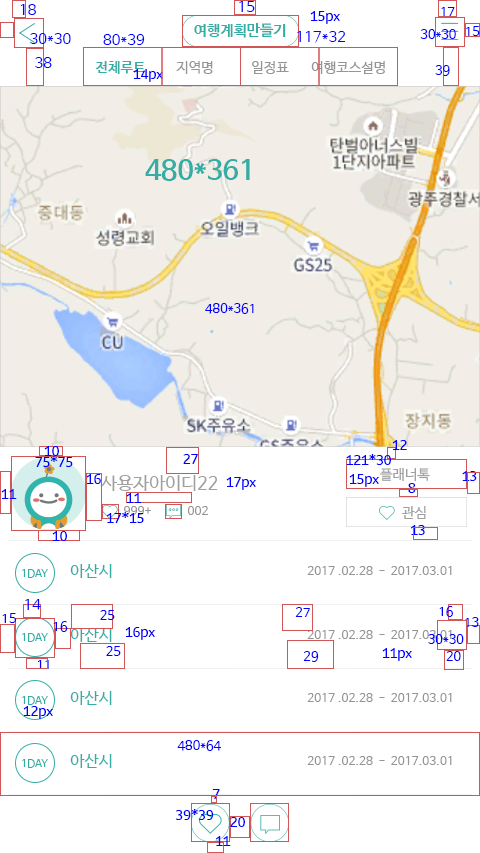
<style>
.page{position:relative;width:480px;height:853px;background:#ffffff}
.page>*{position:absolute;margin:0}
.t1{font:15px "NanumBarunGothic";color:#0000ff}
.t2{font:13px "MoebiusKorea-Regular";color:#0000ff}
.t3{font:13px "NanumBarunGothic";color:#0000ff}
.t4{font:15px "NanumBarunGothicBold";color:#36ada4}
.t5{font:14px "NanumBarunGothicBold";color:#36ada4}
.t6{font:14px "NanumBarunGothic";color:#959595}
.t7{font:28px "NanumBarunGothicBold";color:#36ada4}
.t8{font:14px "NanumBarunGothic";color:#a0a0a0}
.t9{font:18px "NanumBarunGothic";color:#a0a0a0}
.t10{font:12px "NanumBarunGothic";color:#959595}
.t11{font:10.7px "NanumBarunGothic";color:#36ada4}
.t12{font:16px "NanumBarunGothic";color:#36ada4}
</style>
<div class="page">
<p class="t1" style="left:20px;top:4px;width:16px;height:11px">18</p>
<p class="t1" style="left:239px;top:1px;width:16px;height:11px">15</p>
<p class="t2" style="left:310px;top:11px;width:30px;height:13px">15px</p>
<p class="t3" style="left:441px;top:7px;width:14px;height:9px">17</p>
<p class="t4" style="left:194px;top:23px;width:92px;height:15px">여행계획만들기</p>
<p class="t3" style="left:420px;top:29px;width:36px;height:10px">30*30</p>
<p class="t3" style="left:466px;top:26px;width:14px;height:10px">15</p>
<p class="t1" style="left:30px;top:33px;width:41px;height:11px">30*30</p>
<p class="t1" style="left:103px;top:34px;width:42px;height:11px">80*39</p>
<p class="t1" style="left:297px;top:31px;width:49px;height:12px">117*32</p>
<p class="t1" style="left:35px;top:57px;width:17px;height:11px">38</p>
<p class="t5" style="left:95px;top:61px;width:51px;height:13px">전체루트</p>
<p class="t6" style="left:176px;top:61px;width:37px;height:13px">지역명</p>
<p class="t6" style="left:252px;top:61px;width:37px;height:13px">일정표</p>
<p class="t6" style="left:311px;top:61px;width:74px;height:13px">여행코스설명</p>
<p class="t3" style="left:435px;top:65px;width:15px;height:11px">39</p>
<p class="t2" style="left:133px;top:69px;width:30px;height:13px">14px</p>
<p class="t7" style="left:145px;top:159px;width:105px;height:22px">480*361</p>
<p class="t3" style="left:205px;top:303px;width:49px;height:11px">480*361</p>
<p class="t2" style="left:44px;top:446px;width:15px;height:10px">10</p>
<p class="t2" style="left:392px;top:440px;width:15px;height:10px">12</p>
<p class="t2" style="left:35px;top:456px;width:38px;height:11px">75*75</p>
<p class="t2" style="left:183px;top:454px;width:15px;height:10px">27</p>
<p class="t2" style="left:346px;top:454px;width:45px;height:11px">121*30</p>
<p class="t8" style="left:380px;top:468px;width:50px;height:13px">플래너톡</p>
<p class="t2" style="left:462px;top:471px;width:15px;height:10px">13</p>
<p class="t2" style="left:86px;top:474px;width:15px;height:10px">16</p>
<p class="t9" style="left:100px;top:475px;width:118px;height:16px">사용자아이디22</p>
<p class="t2" style="left:226px;top:477px;width:30px;height:13px">17px</p>
<p class="t2" style="left:349px;top:474px;width:30px;height:13px">15px</p>
<p class="t2" style="left:408px;top:483px;width:8px;height:10px">8</p>
<p class="t2" style="left:1px;top:489px;width:16px;height:10px">11</p>
<p class="t2" style="left:126px;top:493px;width:16px;height:10px">11</p>
<p class="t10" style="left:124px;top:506px;width:27px;height:9px">999+</p>
<p class="t10" style="left:187px;top:506px;width:21px;height:9px">002</p>
<p class="t8" style="left:402px;top:506px;width:24px;height:13px">관심</p>
<p class="t2" style="left:107px;top:512px;width:37px;height:11px">17*15</p>
<p class="t2" style="left:52px;top:531px;width:15px;height:10px">10</p>
<p class="t2" style="left:411px;top:525px;width:14px;height:10px">13</p>
<p class="t11" style="left:22px;top:569px;width:26px;height:9px">1DAY</p>
<p class="t12" style="left:70px;top:564px;width:42px;height:14px">아산시</p>
<p class="t10" style="left:307px;top:566px;width:145px;height:9px">2017 .02.28  -  2017.03.01</p>
<p class="t1" style="left:25px;top:599px;width:16px;height:11px">14</p>
<p class="t3" style="left:439px;top:606px;width:14px;height:11px">16</p>
<p class="t3" style="left:2px;top:613px;width:15px;height:10px">15</p>
<p class="t3" style="left:100px;top:610px;width:15px;height:10px">25</p>
<p class="t3" style="left:295px;top:607px;width:15px;height:10px">27</p>
<p class="t3" style="left:465px;top:617px;width:14px;height:10px">13</p>
<p class="t3" style="left:53px;top:621px;width:15px;height:11px">16</p>
<p class="t12" style="left:70px;top:628px;width:42px;height:14px">아산시</p>
<p class="t2" style="left:125px;top:627px;width:30px;height:13px">16px</p>
<p class="t10" style="left:307px;top:630px;width:145px;height:9px">2017 .02.28  -  2017.03.01</p>
<p class="t11" style="left:22px;top:633px;width:26px;height:9px">1DAY</p>
<p class="t3" style="left:428px;top:634px;width:36px;height:10px">30*30</p>
<p class="t3" style="left:106px;top:646px;width:15px;height:10px">25</p>
<p class="t3" style="left:303px;top:651px;width:16px;height:11px">29</p>
<p class="t2" style="left:382px;top:648px;width:30px;height:13px">11px</p>
<p class="t3" style="left:446px;top:651px;width:15px;height:10px">20</p>
<p class="t3" style="left:38px;top:660px;width:11px;height:9px">11</p>
<p class="t11" style="left:22px;top:696px;width:26px;height:9px">1DAY</p>
<p class="t12" style="left:70px;top:691px;width:42px;height:14px">아산시</p>
<p class="t10" style="left:307px;top:693px;width:145px;height:9px">2017 .02.28  -  2017.03.01</p>
<p class="t2" style="left:23px;top:706px;width:30px;height:13px">12px</p>
<p class="t3" style="left:177px;top:740px;width:44px;height:11px">480*64</p>
<p class="t11" style="left:22px;top:759px;width:26px;height:9px">1DAY</p>
<p class="t12" style="left:70px;top:754px;width:42px;height:14px">아산시</p>
<p class="t10" style="left:307px;top:756px;width:145px;height:9px">2017 .02.28  -  2017.03.01</p>
<p class="t2" style="left:212px;top:789px;width:8px;height:10px">7</p>
<p class="t2" style="left:175px;top:809px;width:39px;height:11px">39*39</p>
<p class="t2" style="left:230px;top:817px;width:15px;height:10px">20</p>
<p class="t2" style="left:216px;top:836px;width:15px;height:10px">11</p>
</div>
